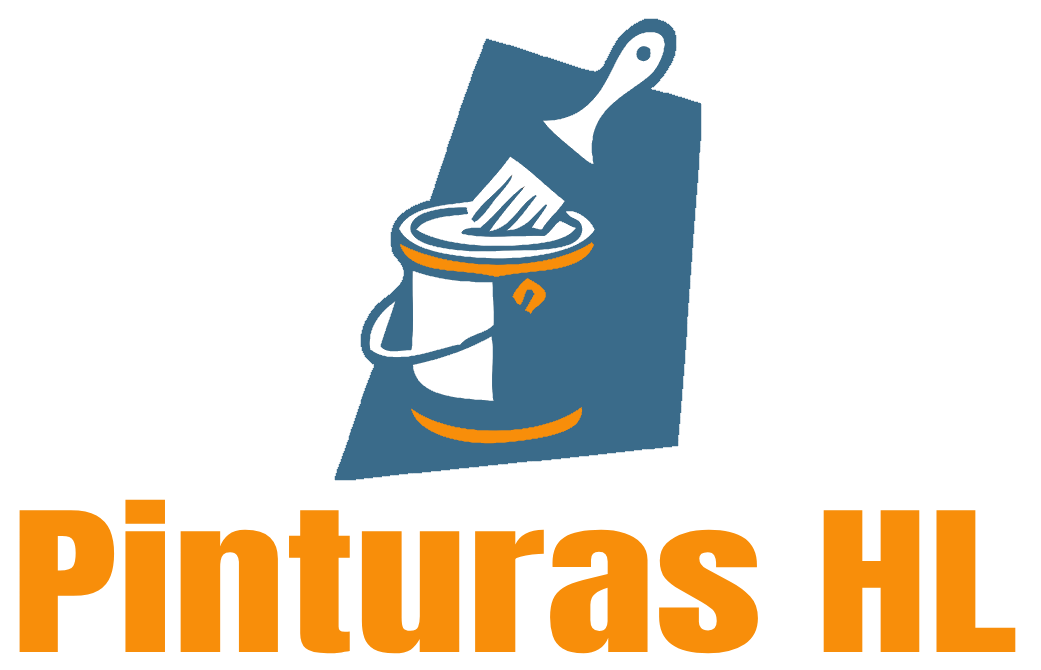
<style>
.page{position:relative;width:1041px;height:670px;background:#ffffff}
.page>*{position:absolute;margin:0}
.t1{font:165px "Anton-Regular";color:#f88e0a;scale:1.37 1}
</style>
<div class="page">
<p class="t1" style="left:19px;top:499px;width:997px;height:155px">Pinturas HL</p>
</div>
